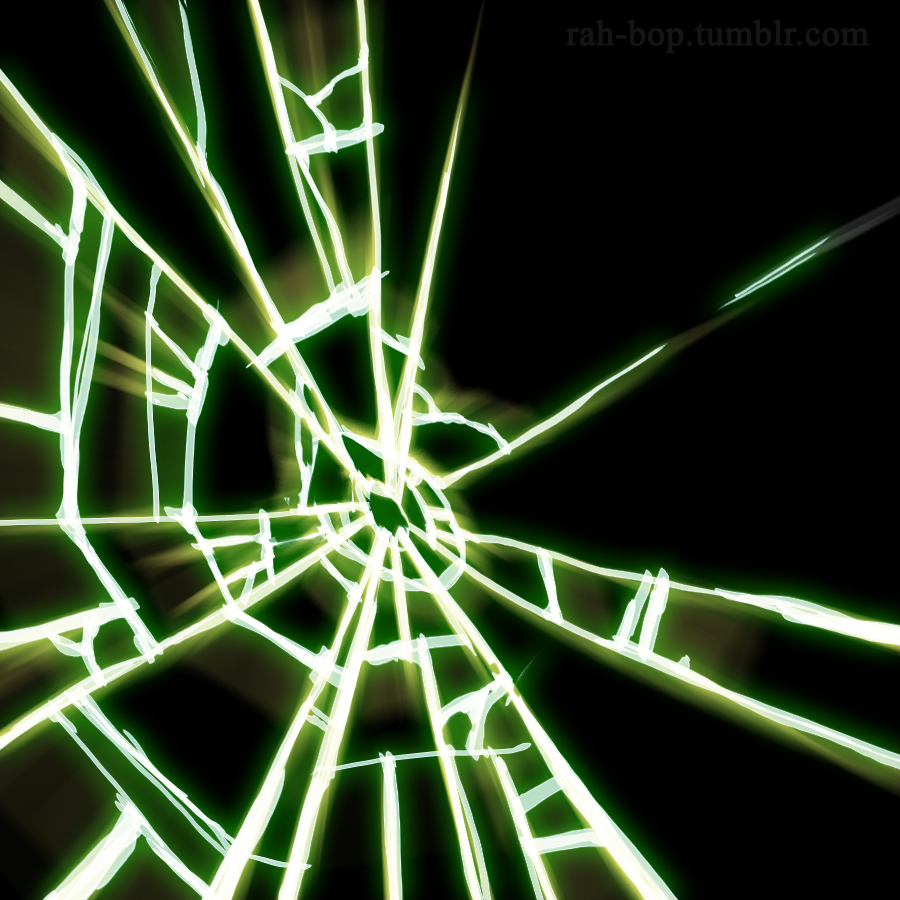
<style>
.page{position:relative;width:900px;height:900px;background:#000000}
.page>*{position:absolute;margin:0}
.t1{font:36px "TimesNewRomanPSMT";color:#151515;font-weight:bold}
</style>
<div class="page">
<p class="t1" style="left:565px;top:19px;width:305px;height:35px">rah-bop.tumblr.com</p>
</div>
